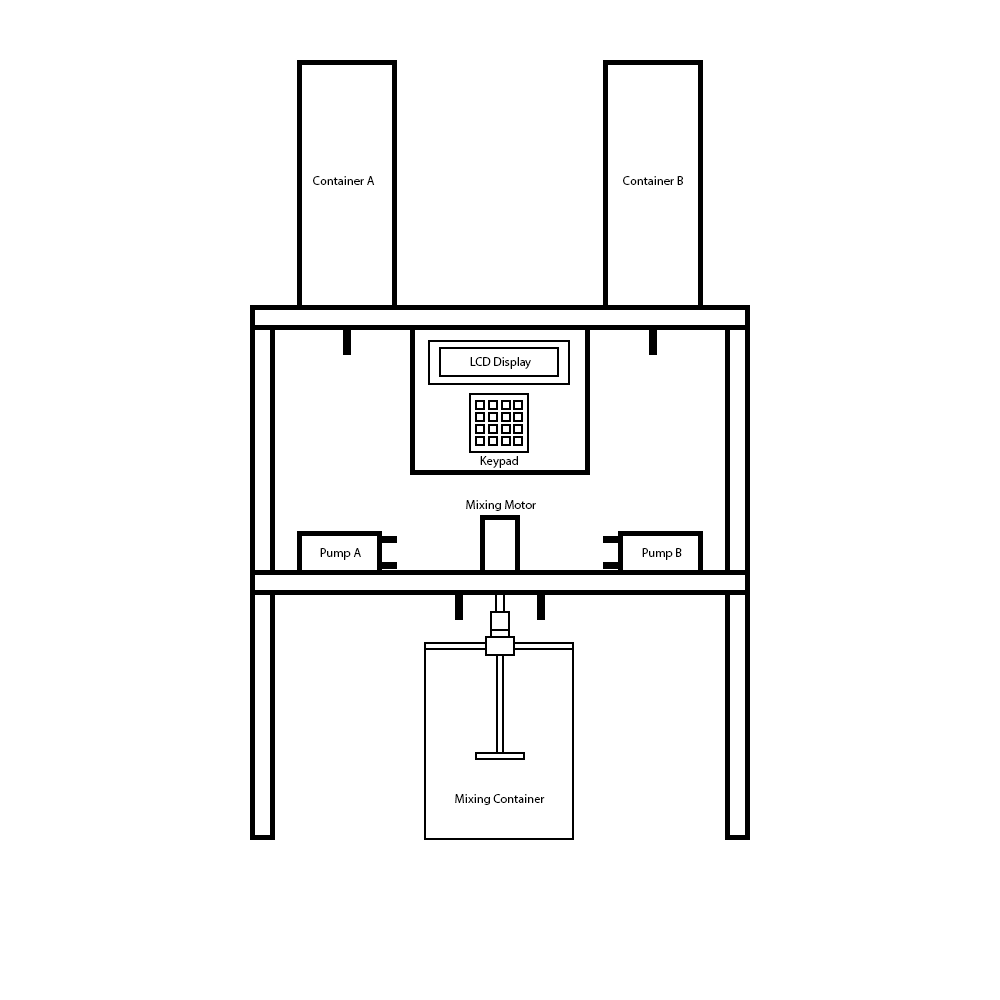
<style>
.page{position:relative;width:1000px;height:1000px;background:#ffffff}
.page>*{position:absolute;margin:0}
.t1{font:12.5px "MyriadPro-Regular";color:#000000}
</style>
<div class="page">
<p class="t1" style="left:313px;top:176px;width:62px;height:9px">Container A</p>
<p class="t1" style="left:623px;top:176px;width:60px;height:9px">Container B</p>
<p class="t1" style="left:470px;top:357px;width:61px;height:12px">LCD Display</p>
<p class="t1" style="left:480px;top:456px;width:38px;height:12px">Keypad</p>
<p class="t1" style="left:466px;top:500px;width:70px;height:11px">Mixing Motor</p>
<p class="t1" style="left:320px;top:548px;width:41px;height:12px">Pump A</p>
<p class="t1" style="left:642px;top:548px;width:40px;height:12px">Pump B</p>
<p class="t1" style="left:455px;top:794px;width:90px;height:11px">Mixing Container</p>
</div>
